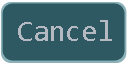
<style>
.page{position:relative;width:128px;height:64px;background:#2f5962}
.page>*{position:absolute;margin:0}
.t1{font:29.9px "Consolas";color:#b5bac2}
</style>
<div class="page">
<p class="t1" style="left:18px;top:20px;width:94px;height:21px">Cancel</p>
</div>
